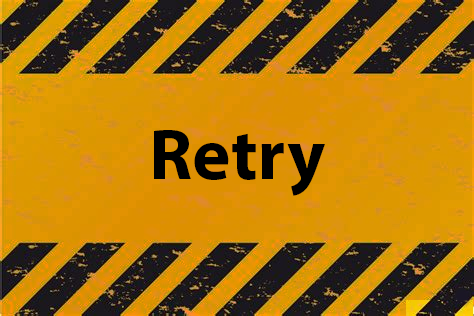
<style>
.page{position:relative;width:474px;height:316px}
.page>*{position:absolute;margin:0}
.t1{font:72.8px "MyriadPro-Bold";color:#000000}
</style>
<div class="page">
<p class="t1" style="left:154px;top:130px;width:171px;height:66px">Retry</p>
</div>
